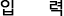
<style>
.page{position:relative;width:64px;height:16px;background:#ffffff}
.page>*{position:absolute;margin:0}
.t1{font:12px "MalgunGothic";color:#000000;font-weight:bold}
</style>
<div class="page">
<p class="t1" style="left:0px;top:0px;width:63px;height:17px">입     력</p>
</div>
